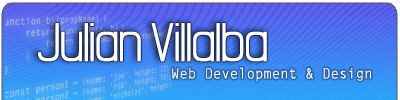
<style>
.page{position:relative;width:400px;height:100px}
.page>*{position:absolute;margin:0}
.t1{font:60px "Asleepytiming";color:#ffffff}
.t2{font:14px "LetterGothicStd";color:#ffffff}
</style>
<div class="page">
<p class="t1" style="left:38px;top:23px;width:229px;height:39px">Julian Villalba</p>
<p class="t2" style="left:172px;top:67px;width:199px;height:15px">Web Development &amp; Design</p>
</div>
